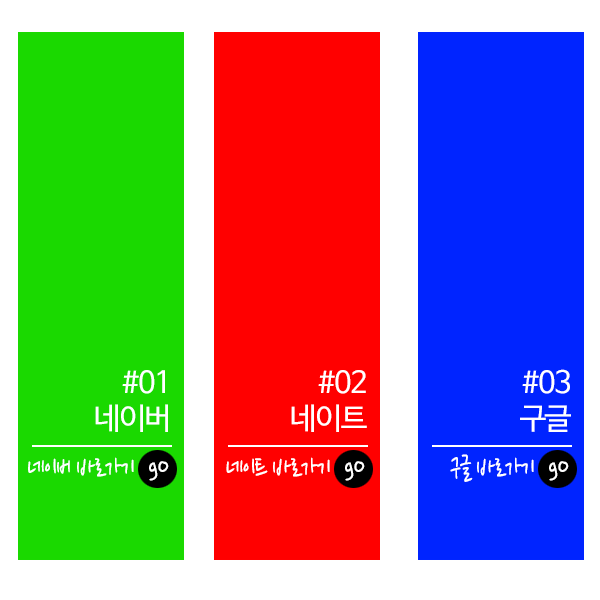
<style>
.page{position:relative;width:600px;height:600px;background:#ffffff}
.page>*{position:absolute;margin:0}
.t1{font:30.1px "NanumBarunGothic";letter-spacing:-0.05em;color:#ffffff}
.t2{font:33px "NanumPen";letter-spacing:-0.05em;color:#ffffff;scale:0.81 1}
.t3{font:30px "NanumPen";letter-spacing:-0.05em;color:#ffffff}
</style>
<div class="page">
<p class="t1" style="left:95px;top:370px;width:73px;height:62px;text-align:right">#01<br>네이버</p>
<p class="t1" style="left:291px;top:370px;width:76px;height:62px;text-align:right">#02<br>네이트</p>
<p class="t1" style="left:520px;top:369px;width:51px;height:63px;text-align:right">#03<br>구글</p>
<p class="t2" style="left:28px;top:457px;width:106px;height:20px">네이버 바로가기</p>
<p class="t3" style="left:149px;top:461px;width:20px;height:20px">go</p>
<p class="t2" style="left:226px;top:457px;width:104px;height:20px">네이트 바로가기</p>
<p class="t3" style="left:345px;top:461px;width:20px;height:20px">go</p>
<p class="t2" style="left:450px;top:454px;width:84px;height:28px">구글 바로가기</p>
<p class="t3" style="left:549px;top:461px;width:20px;height:20px">go</p>
</div>
